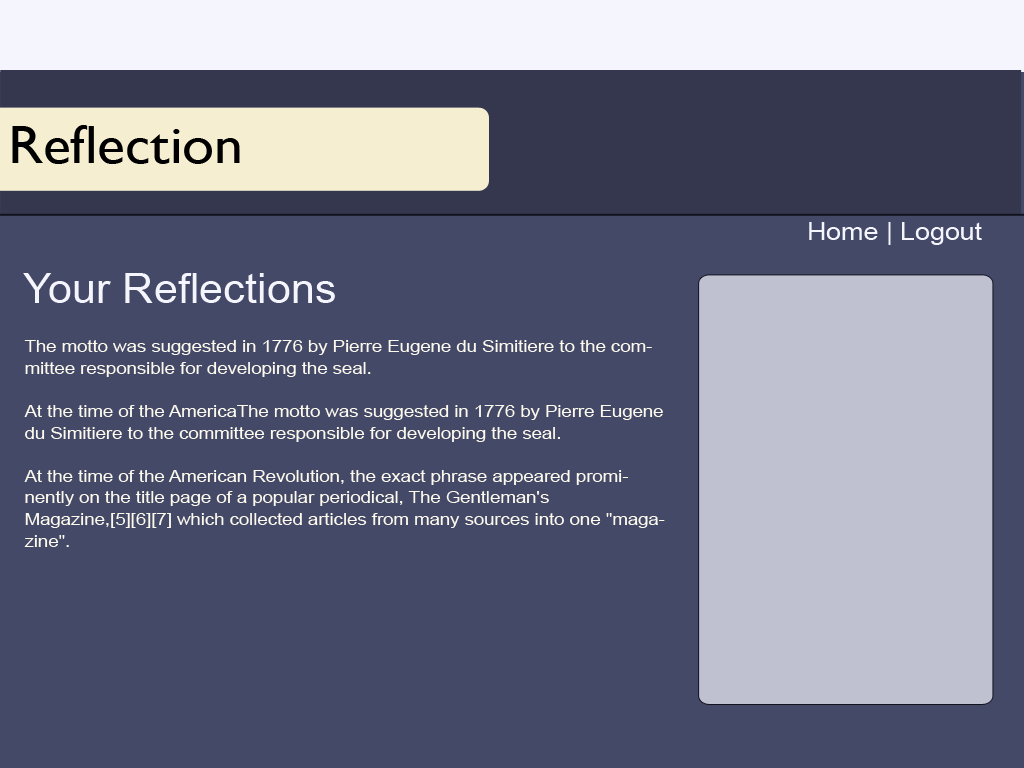
<style>
.page{position:relative;width:1024px;height:768px;background:#454968}
.page>*{position:absolute;margin:0}
.t1{font:54.3px "GillSans";color:#000000;scale:1.06 1}
.t2{font:25.2px "ArialMT";color:#f4f5fd;scale:1.06 1}
.t3{font:40.7px "ArialMT";color:#f4f5fd;scale:1.06 1}
.t4{font:17.5px "ArialMT";color:#fcf9ed;scale:1.06 1}
</style>
<div class="page">
<p class="t1" style="left:12px;top:125px;width:228px;height:39px">Reflection</p>
<p class="t2" style="left:809px;top:222px;width:173px;height:23px">Home | Logout</p>
<p class="t3" style="left:23px;top:273px;width:312px;height:30px">Your Reflections</p>
<p class="t4" style="left:24px;top:340px;width:641px;height:207px">The motto was suggested in 1776 by Pierre Eugene du Simitiere to the committee responsible for developing the seal. <br><br>At the time of the AmericaThe motto was suggested in 1776 by Pierre Eugene du Simitiere to the committee responsible for developing the seal. <br><br>At the time of the American Revolution, the exact phrase appeared prominently on the title page of a popular periodical, The Gentleman's Magazine,[5][6][7] which collected articles from many sources into one "magazine".</p>
</div>
